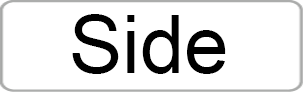
<style>
.page{position:relative;width:303px;height:92px;background:#ffffff}
.page>*{position:absolute;margin:0}
.t1{font:80px "ArialMT";color:#000000}
</style>
<div class="page">
<p class="t1" style="left:72px;top:14px;width:154px;height:60px">Side</p>
</div>
